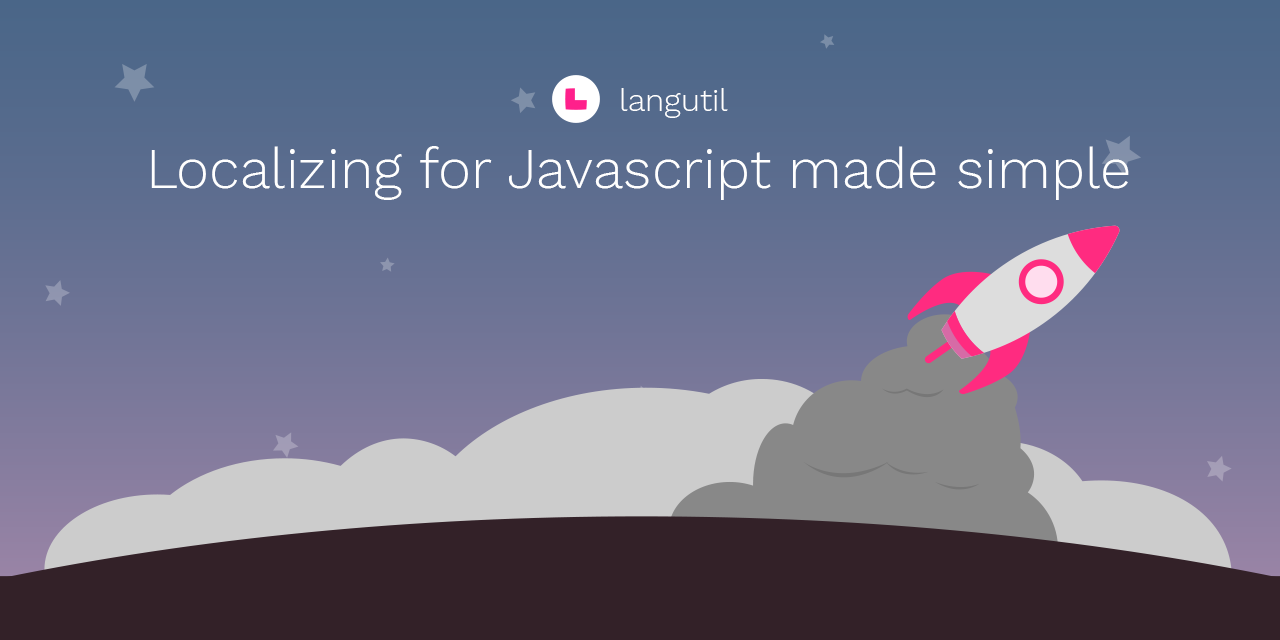
<style>
.page{position:relative;width:1280px;height:640px}
.page>*{position:absolute;margin:0}
.t1{font:32px "WorkSans-Light";letter-spacing:0.001em;color:#ffffff}
.t2{font:56px "WorkSans-Light";letter-spacing:0.001em;color:#ffffff}
</style>
<div class="page">
<p class="t1" style="left:621px;top:88px;width:107px;height:30px">langutil</p>
<p class="t2" style="left:151px;top:146px;width:978px;height:54px">Localizing for Javascript made simple</p>
</div>
